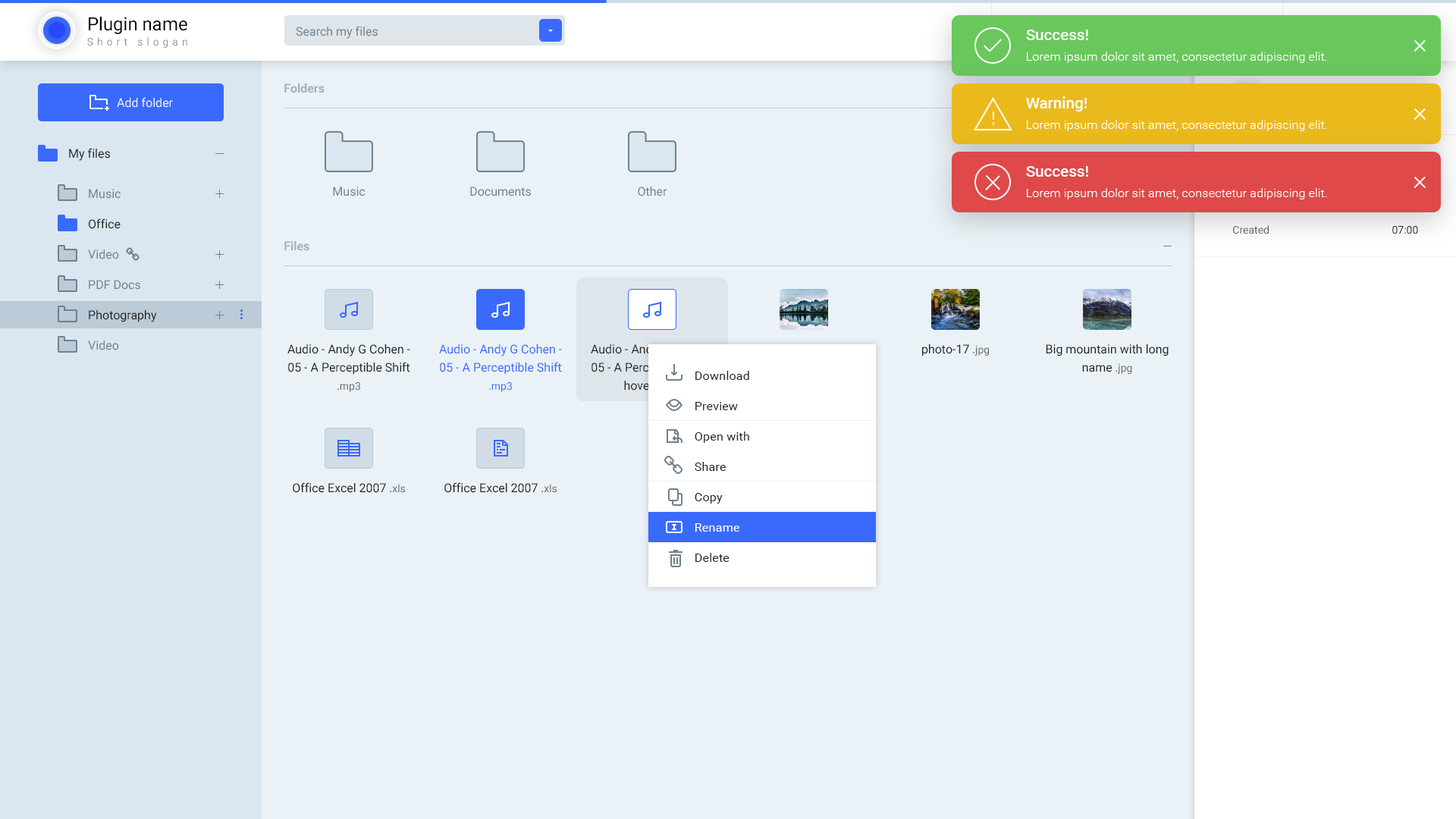
<style>
.page{position:relative;width:1456px;height:819px;background:#ebf2f7}
.page>*{position:absolute;margin:0}
.t1{font:18.2px "Roboto-Regular";color:#000000}
.t2{font:12.1px "Roboto-Regular";color:#70818c}
.t3{font:15.2px "Roboto-Medium";color:#feffff;scale:1.03 1}
.t4{font:10.6px "Roboto-Regular";letter-spacing:0.35em;color:#999999}
.t5{font:12.1px "Roboto-Light";color:#feffff;scale:1.03 1}
.t6{font:12.1px "Roboto-Bold";color:#a5b0b8}
.t7{font:12.1px "Roboto-Regular";color:#ebf2f7}
.t8{font:15.2px "Roboto-Medium";color:#ffffff;scale:1.03 1}
.t9{font:12.1px "Roboto-Light";color:#ffffff;scale:1.03 1}
.t10{font:12.1px "Roboto-Regular";color:#222222}
.t11{font:10.6px/22.7px "Roboto-Regular";color:#df4949}
.t12{font:12.1px/30.3px "Roboto-Regular";color:#70818c}
.t13{font:12.1px/30.3px "Roboto-Regular";color:#222222}
.t14{font:12.1px/18.2px "Roboto-Regular";color:#222222}
.t15{font:10.6px/18.2px "Roboto-Regular";color:#222222}
.t16{font:10.6px/18.2px "Roboto-Regular";color:#666666}
.t17{font:12.1px/18.2px "Roboto-Regular";color:#396afc}
.t18{font:10.6px/18.2px "Roboto-Regular";color:#396afc}
.t19{font:12.1px/18.2px "Roboto-Regular"}
.t20{font:10.6px/18.2px "Roboto-Regular"}
.t21{font:10.6px "Roboto-Regular";color:#222222}
.t22{font:10.6px "Roboto-Regular";color:#666666}
.t23{font:12.1px/30.3px "Roboto-Regular";color:#222222;scale:1.03 1}
.t24{font:12.1px/30.3px "Roboto-Regular";color:#ffffff;scale:1.03 1}
</style>
<div class="page">
<p class="t1" style="left:89px;top:17px;width:98px;height:17px">Plugin name</p>
<p class="t2" style="left:296px;top:26px;width:82px;height:13px">Search my files</p>
<p class="t3" style="left:1026px;top:30px;width:62px;height:10px">Success!</p>
<p class="t4" style="left:87px;top:37px;width:100px;height:11px">Short slogan</p>
<p class="t5" style="left:1027px;top:52px;width:300px;height:11px">Lorem ipsum dolor sit amet, consectetur adipiscing elit.</p>
<p class="t6" style="left:284px;top:83px;width:41px;height:10px">Folders</p>
<p class="t7" style="left:117px;top:97px;width:56px;height:11px">Add folder</p>
<p class="t8" style="left:1026px;top:96px;width:61px;height:15px">Warning!</p>
<p class="t9" style="left:1027px;top:120px;width:300px;height:11px">Lorem ipsum dolor sit amet, consectetur adipiscing elit.</p>
<p class="t10" style="left:69px;top:148px;width:41px;height:13px">My files</p>
<p class="t11" style="left:1232px;top:158px;width:42px;height:76px">Type <br>Size<br>Modified<br>Created</p>
<p class="t11" style="left:1358px;top:157px;width:60px;height:77px;text-align:right">MP3 Audio<br>9.2 MB<br>Feb 23, 2016<br>07:00</p>
<p class="t3" style="left:1026px;top:166px;width:62px;height:11px">Success!</p>
<p class="t12" style="left:88px;top:189px;width:69px;height:161px">Music<br><span class="t13">Office<br></span>Video<br>PDF Docs<br><span class="t13">Photography<br></span>Video</p>
<p class="t2" style="left:333px;top:187px;width:33px;height:9px">Music</p>
<p class="t2" style="left:470px;top:187px;width:61px;height:9px">Documents</p>
<p class="t2" style="left:638px;top:187px;width:29px;height:9px">Other</p>
<p class="t5" style="left:1027px;top:188px;width:300px;height:11px">Lorem ipsum dolor sit amet, consectetur adipiscing elit.</p>
<p class="t6" style="left:284px;top:241px;width:25px;height:10px">Files</p>
<p class="t14" style="left:287px;top:344px;width:123px;height:48px;text-align:center">Audio - Andy G Cohen - 05 - A Perceptible Shift <span class="t15">.</span><span class="t16">mp3</span></p>
<p class="t17" style="left:439px;top:344px;width:123px;height:48px;text-align:center">Audio - Andy G Cohen - 05 - A Perceptible Shift <span class="t18">.mp3</span></p>
<p class="t19" style="left:591px;top:344px;width:123px;height:48px;text-align:center">Audio - Andy G Cohen - 05 - A Perceptible Shift hover <span class="t20">.</span><span class="t20">mp3</span></p>
<p class="t10" style="left:922px;top:344px;width:67px;height:12px">photo-17 <span class="t21">.</span><span class="t22">jpg</span></p>
<p class="t14" style="left:1046px;top:344px;width:123px;height:30px;text-align:center">Big mountain with long name <span class="t15">.</span><span class="t16">jpg</span></p>
<p class="t23" style="left:695px;top:371px;width:54px;height:191px">Download<br>Preview<br>Open with<br>Share<br>Copy<br><span class="t24">Rename<br></span>Delete</p>
<p class="t10" style="left:293px;top:482px;width:112px;height:11px">Office Excel 2007 <span class="t21">.</span><span class="t22">xls</span></p>
<p class="t10" style="left:444px;top:482px;width:113px;height:11px">Office Excel 2007 <span class="t21">.</span><span class="t22">xls</span></p>
</div>
